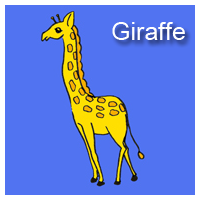
<style>
.page{position:relative;width:200px;height:200px;background:#5173f1}
.page>*{position:absolute;margin:0}
.t1{font:25px "ArialMT";color:#ffffff}
</style>
<div class="page">
<p class="t1" style="left:112px;top:22px;width:73px;height:18px">Giraffe</p>
</div>
